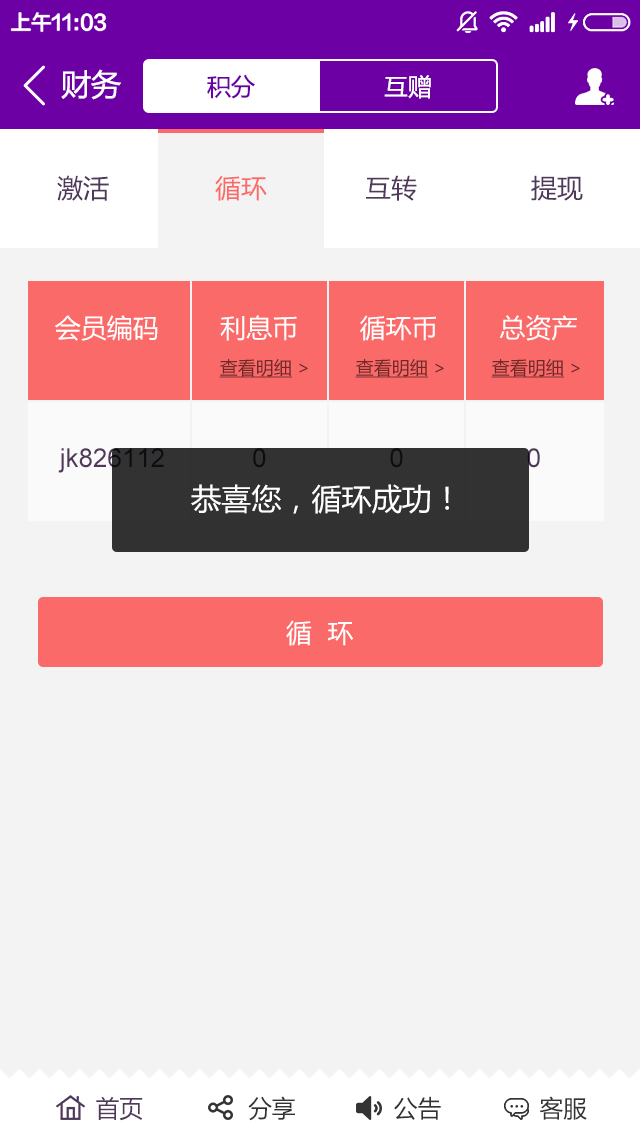
<style>
.page{position:relative;width:640px;height:1136px;background:#f3f3f3}
.page>*{position:absolute;margin:0}
.t1{font:30px "MicrosoftYaHei";color:#ffffff}
.t2{font:24px "MicrosoftYaHei";color:#6d00a5}
.t3{font:24px "MicrosoftYaHei";color:#ffffff}
.t4{font:26px "MicrosoftYaHei";color:#50385b}
.t5{font:26px "MicrosoftYaHei";color:#f96a69}
.t6{font:26px "MicrosoftYaHei";color:#ffffff}
.t7{font:18px "MicrosoftYaHei";color:#6f2928;text-decoration:underline}
.t8{font:18px "MicrosoftYaHei";color:#6f2928}
.t9{font:24px "MicrosoftYaHei";color:#333333}
.t10{font:24px "MicrosoftYaHei";color:#50385b}
</style>
<div class="page">
<p class="t1" style="left:61px;top:69px;width:60px;height:31px">财务</p>
<p class="t2" style="left:207px;top:74px;width:48px;height:25px">积分</p>
<p class="t3" style="left:384px;top:75px;width:47px;height:24px">互赠</p>
<p class="t4" style="left:57px;top:175px;width:52px;height:26px">激活</p>
<p class="t5" style="left:215px;top:175px;width:52px;height:26px">循环</p>
<p class="t4" style="left:366px;top:175px;width:51px;height:26px">互转</p>
<p class="t4" style="left:531px;top:175px;width:52px;height:26px">提现</p>
<p class="t6" style="left:55px;top:315px;width:522px;height:26px">会员编码        利息币        循环币        总资产</p>
<p class="t7" style="left:219px;top:359px;width:89px;height:19px">查看明细<span class="t8"> &gt;</span></p>
<p class="t7" style="left:355px;top:359px;width:89px;height:19px">查看明细<span class="t8"> &gt;</span></p>
<p class="t7" style="left:491px;top:359px;width:89px;height:19px">查看明细<span class="t8"> &gt;</span></p>
<p class="t1" style="left:191px;top:484px;width:258px;height:30px">恭喜您，循环成功！</p>
<p class="t6" style="left:286px;top:620px;width:67px;height:26px">循  环</p>
<p class="t9" style="left:96px;top:1096px;width:491px;height:25px"><span class="t10">首页</span>               分享              公告              客服</p>
</div>
